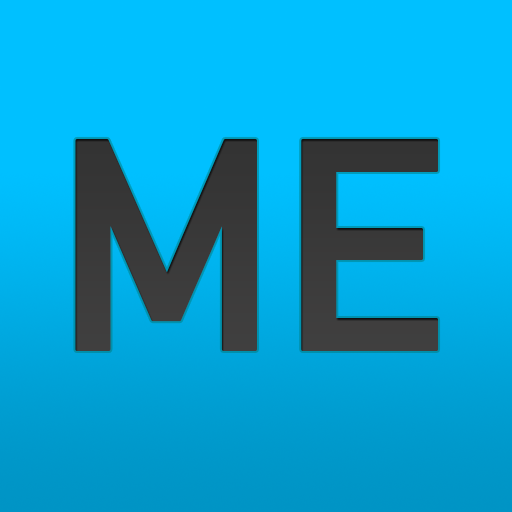
<style>
.page{position:relative;width:512px;height:512px;background:#00c0ff}
.page>*{position:absolute;margin:0}
.t1{font:298px "AlteDIN1451Mittelschriftgepraegt";color:#393939}
</style>
<div class="page">
<p class="t1" style="left:75px;top:138px;width:364px;height:213px">ME</p>
</div>
